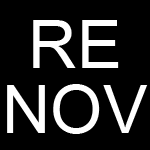
<style>
.page{position:relative;width:150px;height:150px;background:#000000}
.page>*{position:absolute;margin:0}
.t1{font:67.3px/65px "ArialMT";color:#ffffff}
</style>
<div class="page">
<p class="t1" style="left:7px;top:20px;width:141px;height:114px;text-align:center">RE<br>NOV</p>
</div>
